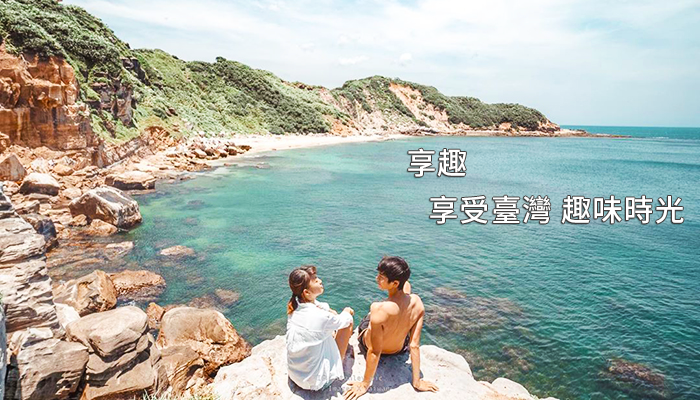
<style>
.page{position:relative;width:700px;height:400px}
.page>*{position:absolute;margin:0}
.t1{font:30px "NotoSansTC-Medium";letter-spacing:0.04em;color:#ffffff}
</style>
<div class="page">
<p class="t1" style="left:408px;top:148px;width:58px;height:29px">享趣</p>
<p class="t1" style="left:430px;top:195px;width:254px;height:29px">享受臺灣 趣味時光</p>
</div>
